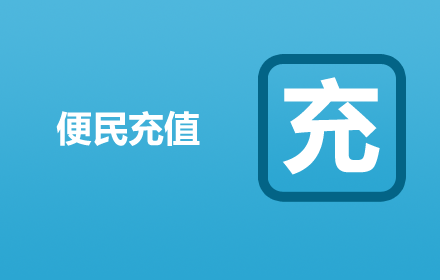
<style>
.page{position:relative;width:440px;height:280px}
.page>*{position:absolute;margin:0}
.t1{font:36px "MicrosoftYaHei-Bold";color:#ffffff}
</style>
<div class="page">
<p class="t1" style="left:56px;top:110px;width:144px;height:36px">便民充值</p>
</div>
